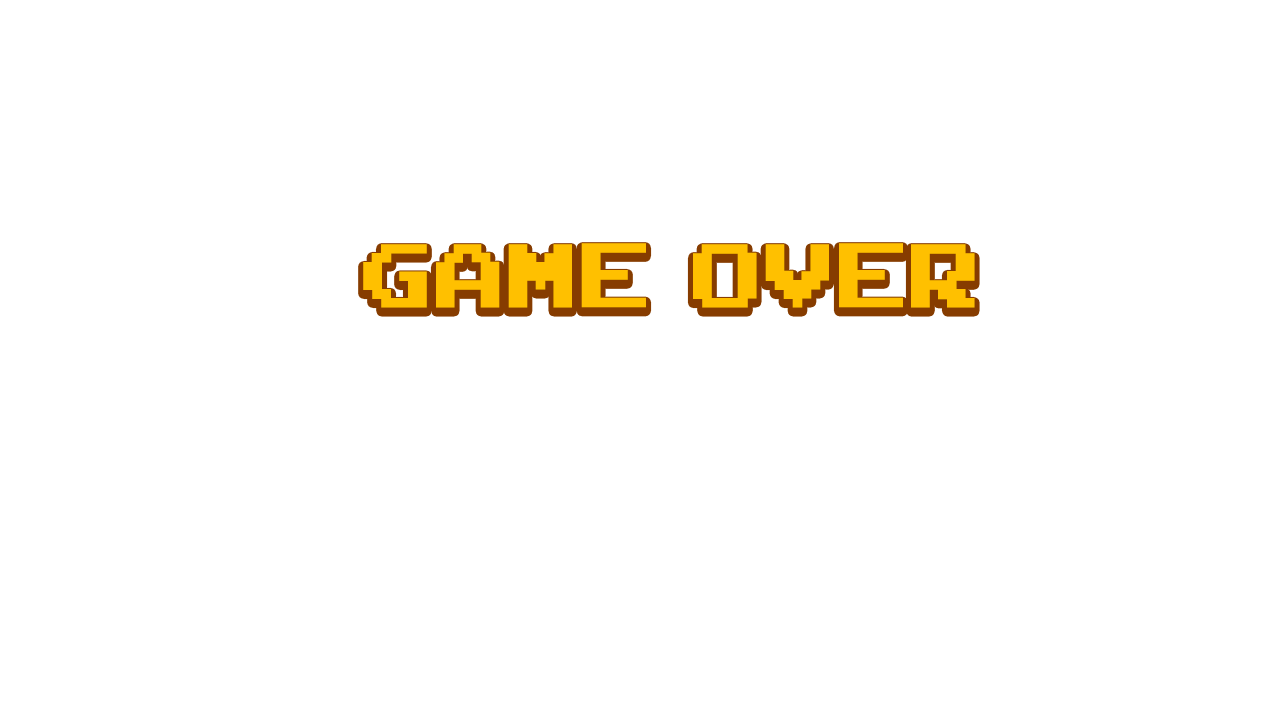
<style>
.page{position:relative;width:1280px;height:720px;background:#ffffff}
.page>*{position:absolute;margin:0}
.t1{font:125.9px "ArcadeClassic";color:#ffc000;font-weight:bold}
</style>
<div class="page">
<p class="t1" style="left:363px;top:243px;width:612px;height:65px">game  over</p>
</div>
